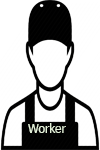
<style>
.page{position:relative;width:100px;height:150px;background:#ffffff}
.page>*{position:absolute;margin:0}
.t1{font:12px "Tahoma";color:#e4f1d9}
</style>
<div class="page">
<p class="t1" style="left:28px;top:123px;width:38px;height:10px">Worker</p>
</div>
